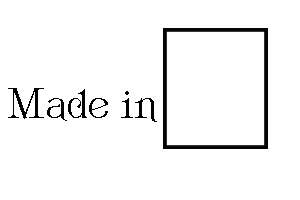
<style>
.page{position:relative;width:300px;height:200px;background:#ffffff}
.page>*{position:absolute;margin:0}
.t1{font:44px "Ametist";color:#030303}
.t2{font:57px "Algerian";color:#ffffff}
.t3{font:45px "Algerian";color:#ffffff}
</style>
<div class="page">
<p class="t1" style="left:8px;top:71px;width:253px;height:51px">Made in <span class="t2">V</span><span class="t3">.</span><span class="t2">V</span><span class="t3">.</span></p>
</div>
